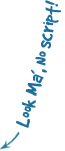
<style>
.page{position:relative;width:65px;height:151px;background:#ffffff}
.page>*{position:absolute;margin:0}
.t1{font:21px "GoodDog";color:#1e6f9c}
</style>
<div class="page">
<p class="t1" style="left:16px;top:0px;width:46px;height:128px;rotate:-80deg">Look Ma’, No script!</p>
</div>
